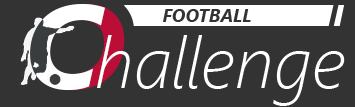
<style>
.page{position:relative;width:355px;height:107px;background:#333333}
.page>*{position:absolute;margin:0}
.t1{font:120px "SegoeUI-BoldItalic";color:#ffffff}
.t2{font:120px "SegoeUI-BoldItalic"}
.t3{font:72px "SegoeUI-LightItalic";color:#ffffff}
</style>
<div class="page">
<p class="t1" style="left:30px;top:4px;width:75px;height:86px">C</p>
<p class="t2" style="left:49px;top:4px;width:76px;height:86px;rotate:180deg">C</p>
<p class="t3" style="left:97px;top:35px;width:248px;height:71px">hallenge</p>
</div>
